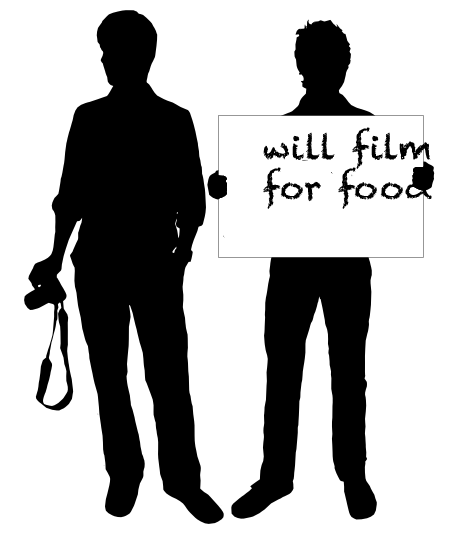
<style>
.page{position:relative;width:450px;height:533px;background:#ffffff}
.page>*{position:absolute;margin:0}
.t1{font:33.2px "Chalkduster";color:#000000}
</style>
<div class="page">
<p class="t1" style="left:263px;top:127px;width:169px;height:82px">will film <br>for food</p>
</div>
